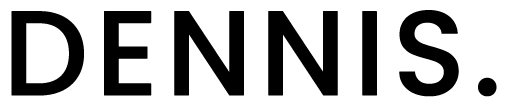
<style>
.page{position:relative;width:509px;height:106px;background:#ffffff}
.page>*{position:absolute;margin:0}
.t1{font:120px "Poppins-Medium";letter-spacing:0.035em;color:#000000;text-transform:uppercase;font-weight:bold}
</style>
<div class="page">
<p class="t1" style="left:11px;top:10px;width:486px;height:87px">DENNIS.</p>
</div>
